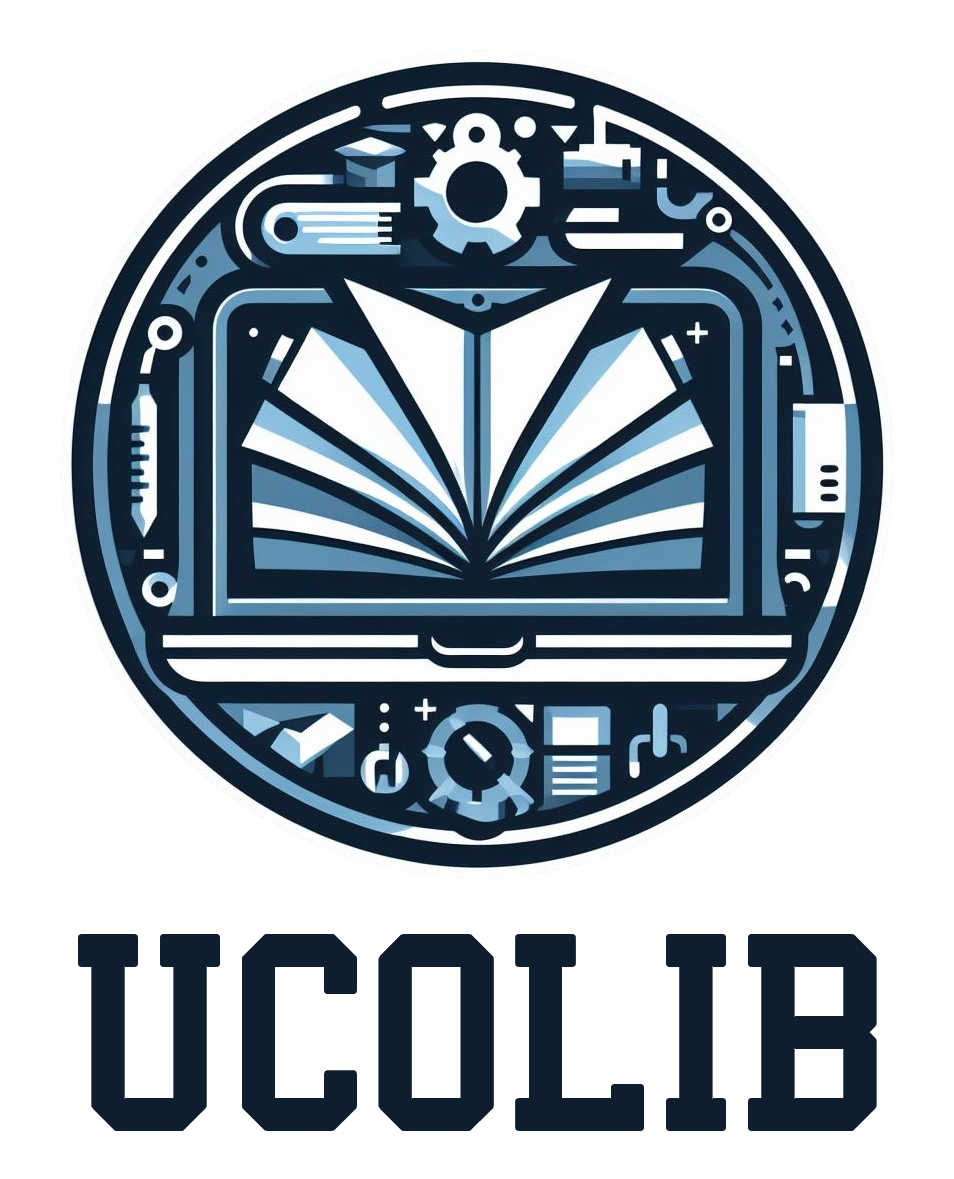
<style>
.page{position:relative;width:954px;height:1179px;background:#ffffff}
.page>*{position:absolute;margin:0}
.t1{font:280px "College";color:#0e1e2e}
</style>
<div class="page">
<p class="t1" style="left:80px;top:936px;width:794px;height:192px">UCOLIB</p>
</div>
